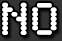
<style>
.page{position:relative;width:62px;height:41px;background:#ffffff}
.page>*{position:absolute;margin:0}
.t1{font:47.7px "SynchroLET";color:#ffffff}
</style>
<div class="page">
<p class="t1" style="left:2px;top:2px;width:55px;height:33px">NO</p>
</div>
